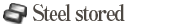
<style>
.page{position:relative;width:196px;height:24px;background:#ffffff}
.page>*{position:absolute;margin:0}
.t1{font:22px "RyuminPro-ExBold";letter-spacing:-0.08em;color:#4d4843;scale:0.9 1}
</style>
<div class="page">
<p class="t1" style="left:33px;top:4px;width:92px;height:18px">Steel stored</p>
</div>
